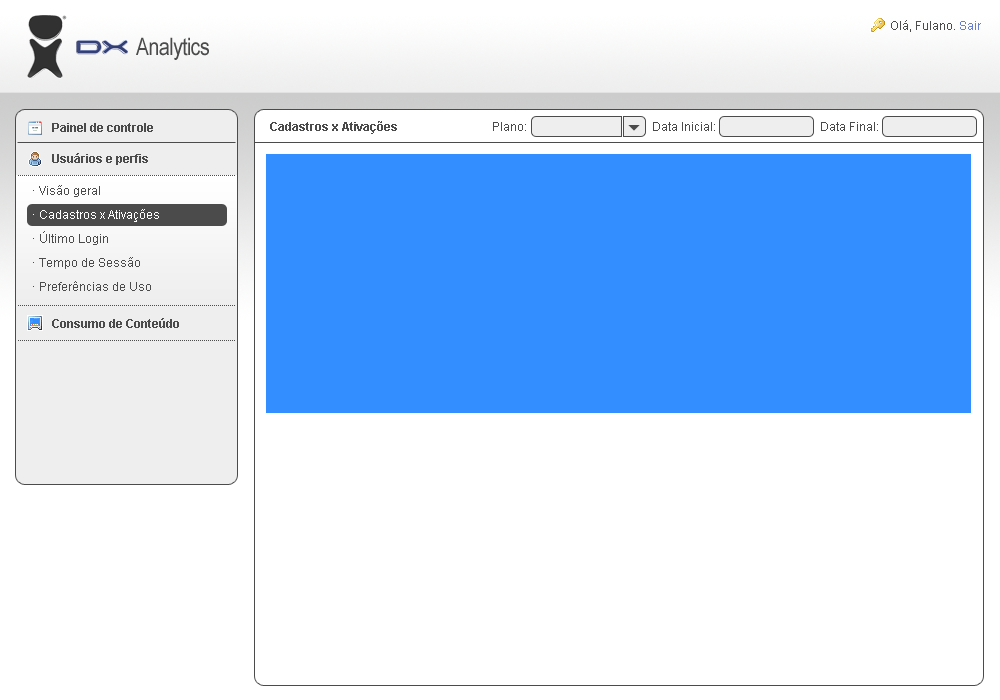
<style>
.page{position:relative;width:1000px;height:700px;background:#ffffff}
.page>*{position:absolute;margin:0}
.t1{font:12px "ArialMT";color:#4b4b4b}
.t2{font:12px "ArialMT";color:#6a7ecf}
.t3{font:24px "ArialNarrow";letter-spacing:-0.025em;color:#4b4b4b}
.t4{font:12px "Arial-BoldMT";color:#4b4b4b}
</style>
<div class="page">
<p class="t1" style="left:891px;top:20px;width:90px;height:12px">Olá, Fulano. <span class="t2">Sair</span></p>
<p class="t3" style="left:136px;top:37px;width:73px;height:23px">Analytics</p>
<p class="t4" style="left:52px;top:123px;width:101px;height:9px">Painel de controle</p>
<p class="t4" style="left:270px;top:121px;width:127px;height:13px">Cadastros x Ativações</p>
<p class="t1" style="left:493px;top:122px;width:33px;height:9px">Plano:</p>
<p class="t1" style="left:653px;top:122px;width:62px;height:9px">Data Inicial:</p>
<p class="t1" style="left:821px;top:122px;width:57px;height:9px">Data Final:</p>
<p class="t4" style="left:52px;top:153px;width:96px;height:12px">Usuários e perfis</p>
<p class="t4" style="left:52px;top:318px;width:127px;height:10px">Consumo de Conteúdo</p>
</div>
